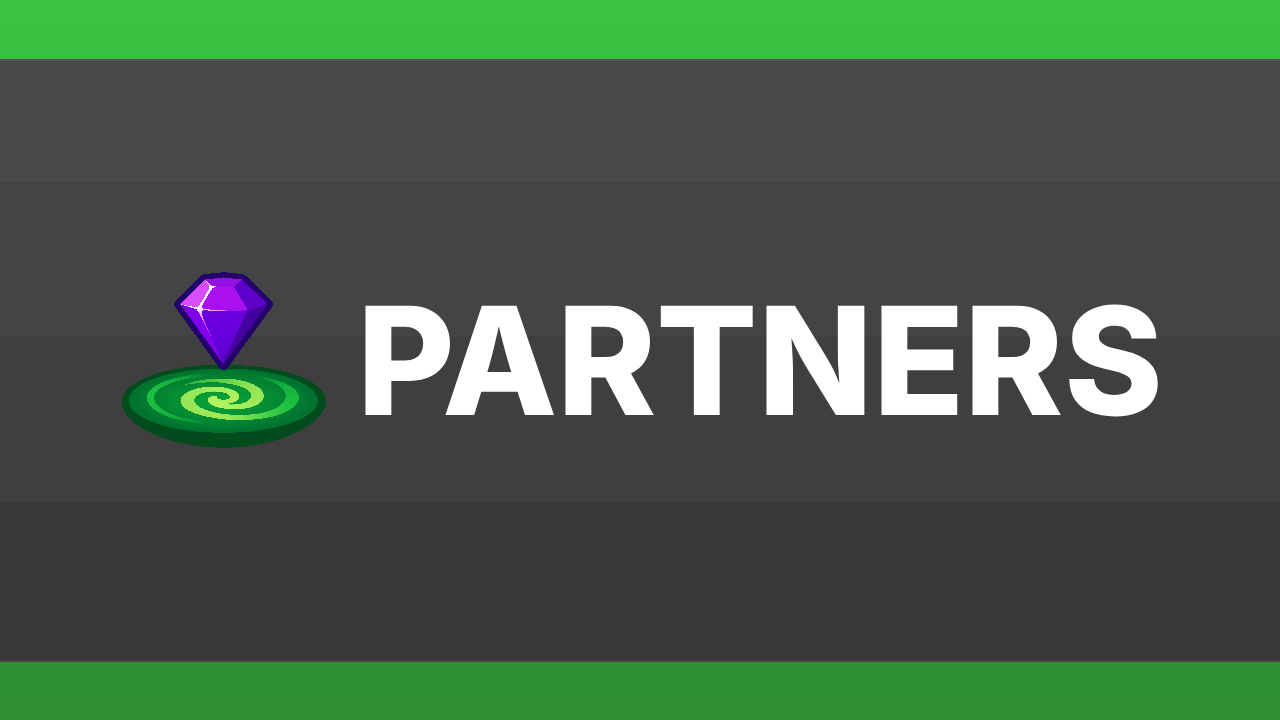
<style>
.page{position:relative;width:1280px;height:720px;background:#383838}
.page>*{position:absolute;margin:0}
.t1{font:150px "InterVariable-ExtraBold";color:#ffffff}
</style>
<div class="page">
<p class="t1" style="left:365px;top:304px;width:793px;height:113px">PARTNERS</p>
</div>
